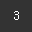
<style>
.page{position:relative;width:32px;height:32px;background:#333333}
.page>*{position:absolute;margin:0}
.t1{font:12px "CenturySchoolbook";letter-spacing:0.06em;color:#ffffff}
</style>
<div class="page">
<p class="t1" style="left:14px;top:11px;width:5px;height:9px">3</p>
</div>
